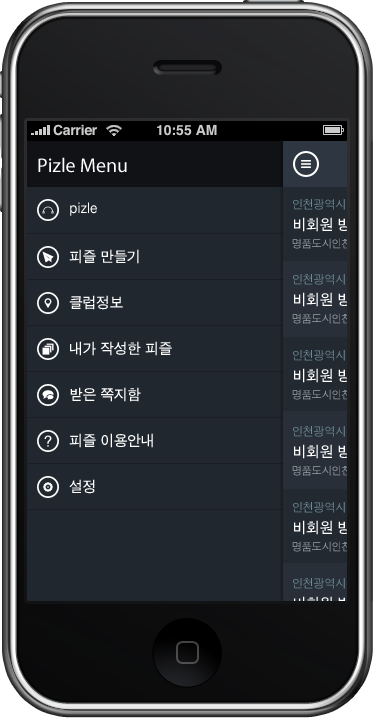
<style>
.page{position:relative;width:373px;height:718px;background:#21272e}
.page>*{position:absolute;margin:0}
.t1{font:20px "MyriadPro-Regular";color:#ffffff}
.t2{font:15px "SandTg";color:#ffffff}
</style>
<div class="page">
<p class="t1" style="left:38px;top:157px;width:89px;height:16px">Pizle Menu</p>
<p class="t1" style="left:38px;top:157px;width:89px;height:16px">Pizle Menu</p>
<p class="t2" style="left:70px;top:202px;width:27px;height:14px">pizle</p>
<p class="t2" style="left:70px;top:202px;width:27px;height:14px">pizle</p>
<p class="t2" style="left:69px;top:249px;width:70px;height:15px">피즐 만들기</p>
<p class="t2" style="left:69px;top:249px;width:70px;height:15px">피즐 만들기</p>
<p class="t2" style="left:69px;top:295px;width:54px;height:15px">클럽정보</p>
<p class="t2" style="left:69px;top:295px;width:54px;height:15px">클럽정보</p>
<p class="t2" style="left:70px;top:341px;width:102px;height:15px">내가 작성한 피즐</p>
<p class="t2" style="left:70px;top:341px;width:102px;height:15px">내가 작성한 피즐</p>
<p class="t2" style="left:70px;top:387px;width:71px;height:15px">받은 쪽지함</p>
<p class="t2" style="left:70px;top:387px;width:71px;height:15px">받은 쪽지함</p>
<p class="t2" style="left:69px;top:433px;width:84px;height:15px">피즐 이용안내</p>
<p class="t2" style="left:69px;top:433px;width:84px;height:15px">피즐 이용안내</p>
<p class="t2" style="left:69px;top:479px;width:26px;height:15px">설정</p>
<p class="t2" style="left:69px;top:479px;width:26px;height:15px">설정</p>
</div>
